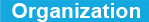
<style>
.page{position:relative;width:149px;height:22px;background:#14a8df}
.page>*{position:absolute;margin:0}
.t1{font:21.1px "Arial-BoldMT";color:#ffffff}
</style>
<div class="page">
<p class="t1" style="left:12px;top:3px;width:128px;height:19px">Organization</p>
</div>
